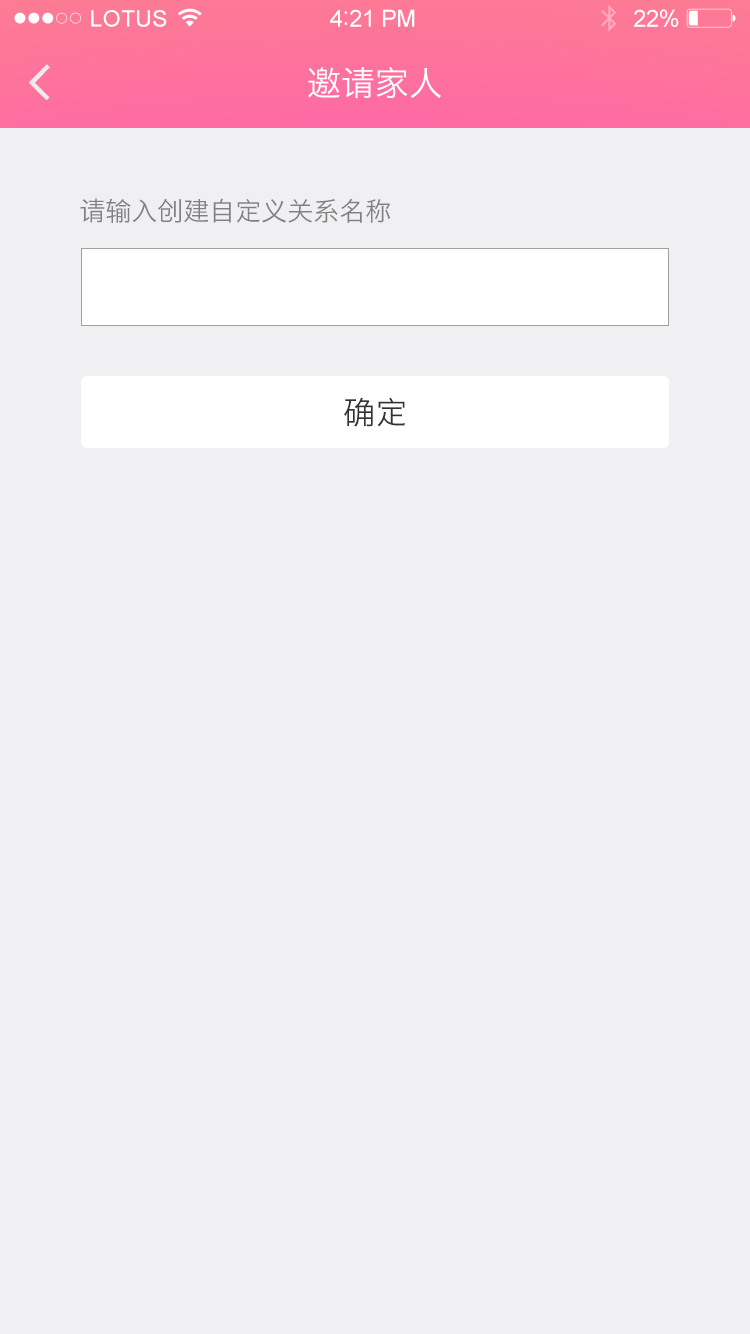
<style>
.page{position:relative;width:750px;height:1334px;background:#f0f0f2}
.page>*{position:absolute;margin:0}
.t1{font:22.6px "ArialMT";letter-spacing:0.02em;color:#ffffff}
.t2{font:23.6px "ArialMT";letter-spacing:-0.02em;color:#ffffff}
.t3{font:25.6px "ArialMT";letter-spacing:-0.02em;color:#ffffff}
.t4{font:34px "HiraginoSansGB-W3";color:#ffffff}
.t5{font:26px "HiraginoSansGB-W3";color:#808080}
.t6{font:32px "HiraginoSansGB-W3";color:#333333}
</style>
<div class="page">
<p class="t1" style="left:91px;top:10px;width:76px;height:17px">LOTUS</p>
<p class="t2" style="left:330px;top:9px;width:85px;height:18px">4<span class="t3">:</span>21 PM</p>
<p class="t2" style="left:634px;top:9px;width:45px;height:18px">22%</p>
<p class="t4" style="left:308px;top:67px;width:133px;height:31px">邀请家人</p>
<p class="t5" style="left:80px;top:198px;width:310px;height:25px">请输入创建自定义关系名称</p>
<p class="t6" style="left:344px;top:397px;width:62px;height:30px">确定</p>
</div>
